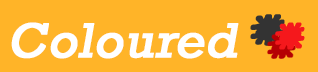
<style>
.page{position:relative;width:318px;height:72px;background:#ffb428}
.page>*{position:absolute;margin:0}
.t1{font:50px "Rockwell";letter-spacing:0.005em;color:#ffffff;font-weight:bold;font-style:italic}
</style>
<div class="page">
<p class="t1" style="left:11px;top:22px;width:228px;height:37px">Coloured</p>
</div>
